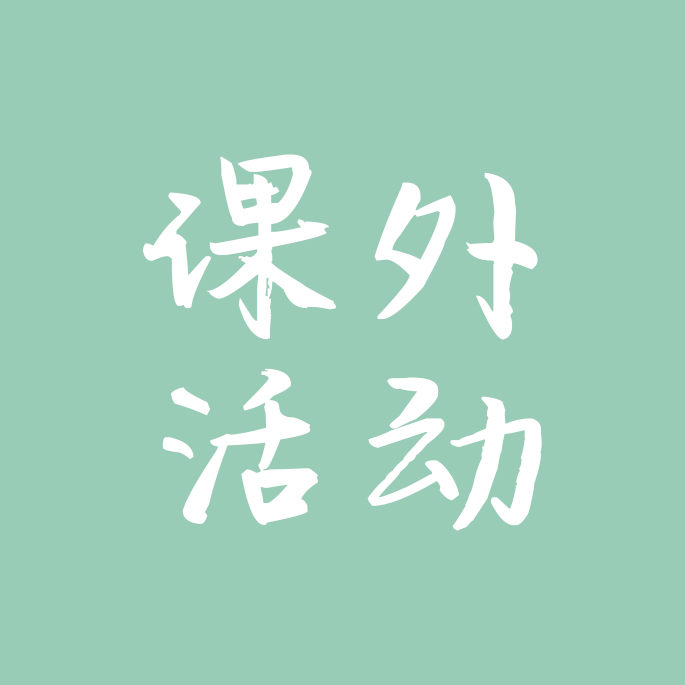
<style>
.page{position:relative;width:685px;height:685px;background:#99ccb6}
.page>*{position:absolute;margin:0}
.t1{font:200px/200px "SentyGoldenBell";color:#ffffff}
</style>
<div class="page">
<p class="t1" style="left:142px;top:154px;width:400px;height:377px">课外<br>活动</p>
</div>
